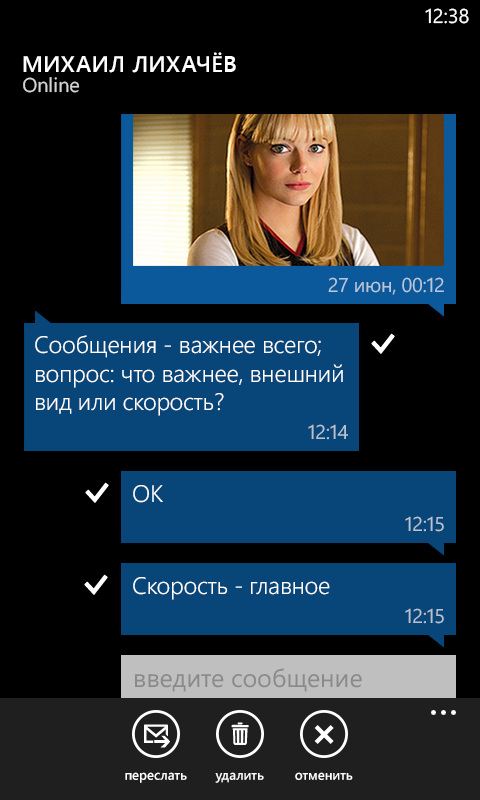
<style>
.page{position:relative;width:480px;height:800px;background:#000000}
.page>*{position:absolute;margin:0}
.t1{font:20px "SegoeWP";color:#ffffff}
.t2{font:22.7px "SegoeWP-Semibold";letter-spacing:0.025em;color:#ffffff;text-transform:uppercase}
.t3{font:24px "SegoeWP-SemiLight";letter-spacing:-0.015em;color:#ffffff}
.t4{font:13.3px "SegoeWP-Semibold";letter-spacing:-0.01em;color:#ffffff}
</style>
<div class="page">
<p class="t1" style="left:425px;top:8px;width:44px;height:16px">12:38</p>
<p class="t2" style="left:23px;top:52px;width:213px;height:21px">Михаил Лихачёв</p>
<p class="t3" style="left:35px;top:335px;width:308px;height:81px">Сообщения - важнее всего;<br>вопрос: что важнее, внешний<br>вид или скорость?</p>
<p class="t3" style="left:133px;top:485px;width:30px;height:18px">ОК</p>
<p class="t3" style="left:133px;top:577px;width:197px;height:23px">Скорость - главное</p>
<p class="t4" style="left:125px;top:772px;width:62px;height:11px">переслать</p>
<p class="t4" style="left:215px;top:772px;width:49px;height:11px">удалить</p>
<p class="t4" style="left:295px;top:772px;width:58px;height:8px">отменить</p>
</div>
